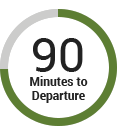
<style>
.page{position:relative;width:117px;height:126px;background:#ffffff}
.page>*{position:absolute;margin:0}
.t1{font:48px "Roboto-Regular";color:#222222;text-transform:uppercase}
.t2{font:12px "Roboto-Bold";color:#222222}
</style>
<div class="page">
<p class="t1" style="left:33px;top:38px;width:50px;height:34px">90</p>
<p class="t2" style="left:30px;top:76px;width:58px;height:27px;text-align:center">Minutes to<br>Departure</p>
</div>
